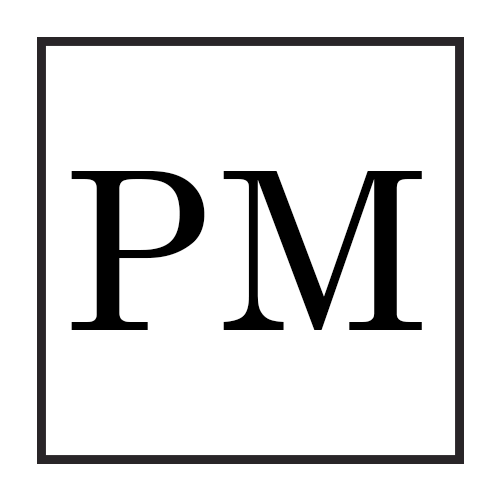
<style>
.page{position:relative;width:500px;height:500px;background:#ffffff}
.page>*{position:absolute;margin:0}
.t1{font:219.8px "Century";letter-spacing:0.05em;color:#000000;text-transform:uppercase}
</style>
<div class="page">
<p class="t1" style="left:71px;top:171px;width:351px;height:159px">PM</p>
</div>
